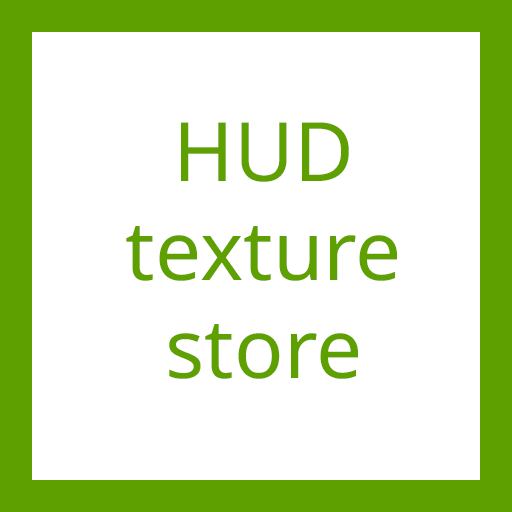
<style>
.page{position:relative;width:512px;height:512px;background:#ffffff}
.page>*{position:absolute;margin:0}
.t1{font:82px "NotoSans-Regular";color:#5da000}
</style>
<div class="page">
<p class="t1" style="left:126px;top:122px;width:271px;height:257px;text-align:center">HUD<br>texture<br>store</p>
</div>
